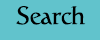
<style>
.page{position:relative;width:100px;height:40px;background:#61c3cc}
.page>*{position:absolute;margin:0}
.t1{font:25px "Catull";color:#000000}
</style>
<div class="page">
<p class="t1" style="left:16px;top:6px;width:70px;height:19px">Search</p>
</div>
